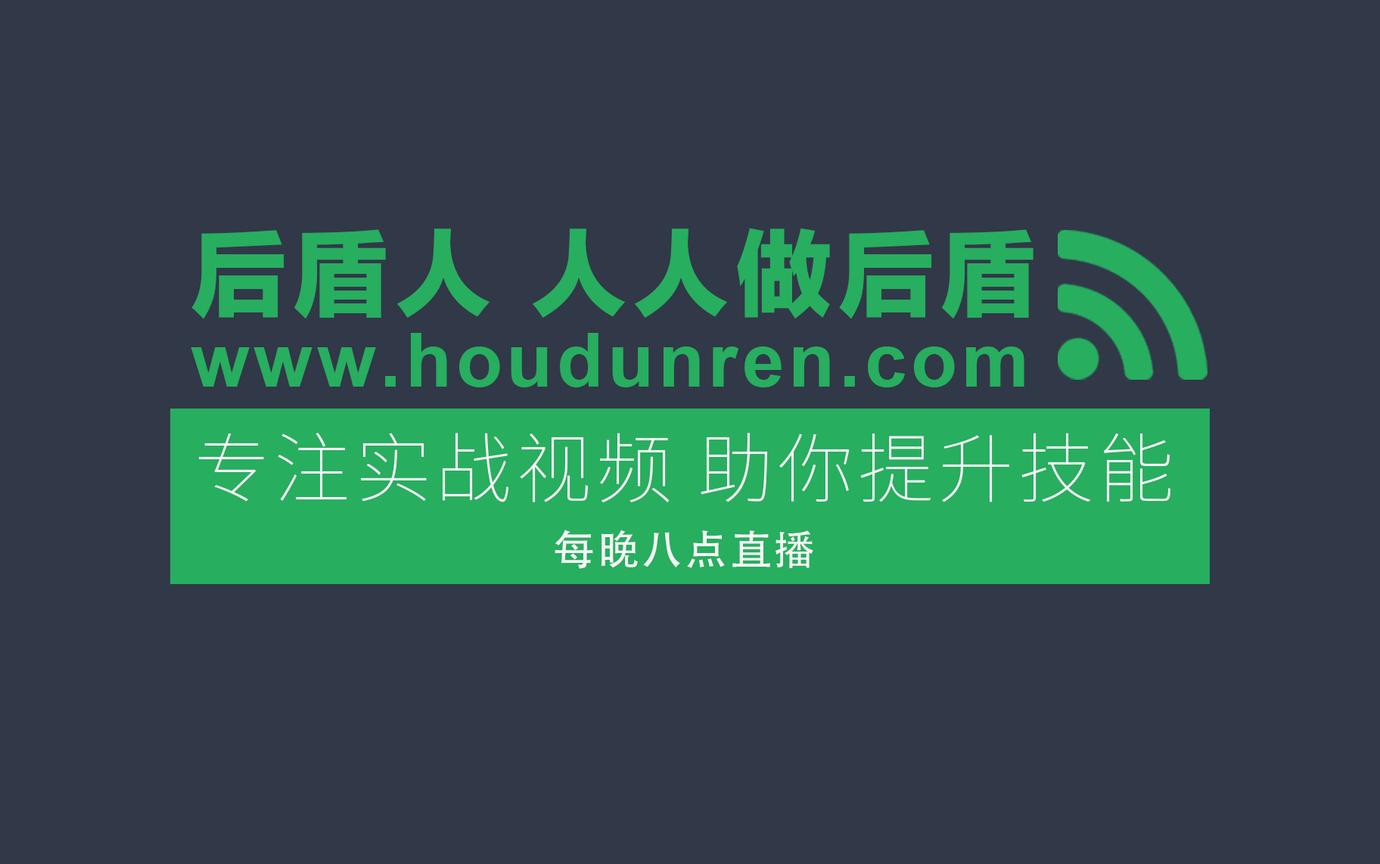
<style>
.page{position:relative;width:1380px;height:864px;background:#313848}
.page>*{position:absolute;margin:0}
.t1{font:96.4px "FZLTTHK--GBK1-0";letter-spacing:0.06em;color:#27ae5f}
.t2{font:75.2px "Arial-BoldMT";letter-spacing:0.06em;color:#27ae5f}
.t3{font:75.7px/98.8px "NotoSansHans-Thin";letter-spacing:0.06em;color:#f5f5f5}
.t4{font:41.6px/102.1px "AdobeHeitiStd-Regular";letter-spacing:0.06em;color:#f5f5f5}
</style>
<div class="page">
<p class="t1" style="left:191px;top:228px;width:843px;height:91px">后盾人 人人做后盾</p>
<p class="t2" style="left:191px;top:333px;width:833px;height:54px">www.houdunren.com</p>
<p class="t3" style="left:199px;top:433px;width:972px;height:136px;text-align:center">专注实战视频 助你提升技能<br><span class="t4">每晚八点直播</span></p>
</div>
